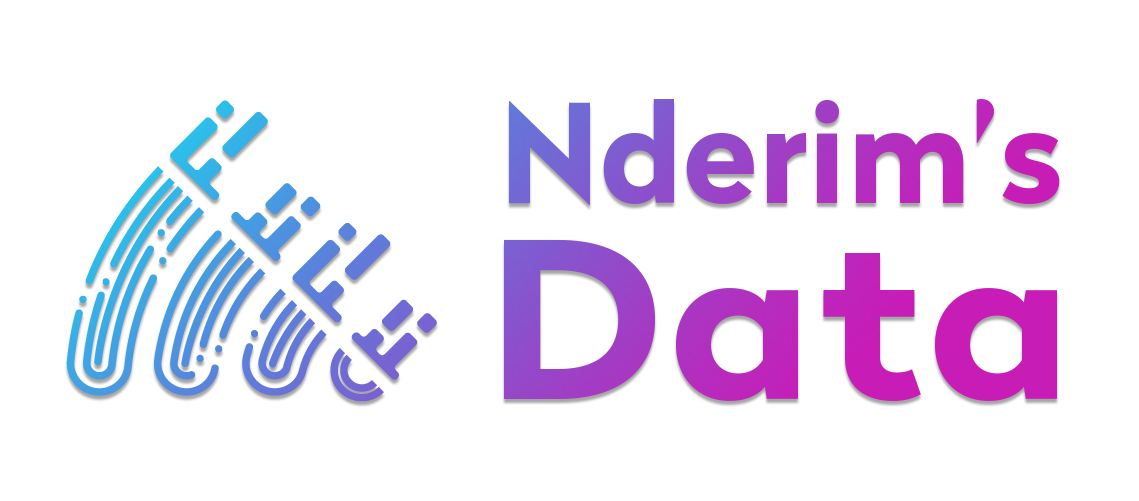
<style>
.page{position:relative;width:1139px;height:501px;background:#ffffff}
.page>*{position:absolute;margin:0}
.t1{font:136.6px "Radikal-Bold"}
.t2{font:215.7px "Radikal-Bold";letter-spacing:0.03em;scale:1.1 1}
</style>
<div class="page">
<p class="t1" style="left:509px;top:99px;width:551px;height:106px">Nderim’s</p>
<p class="t2" style="left:504px;top:239px;width:553px;height:162px">Data</p>
</div>
